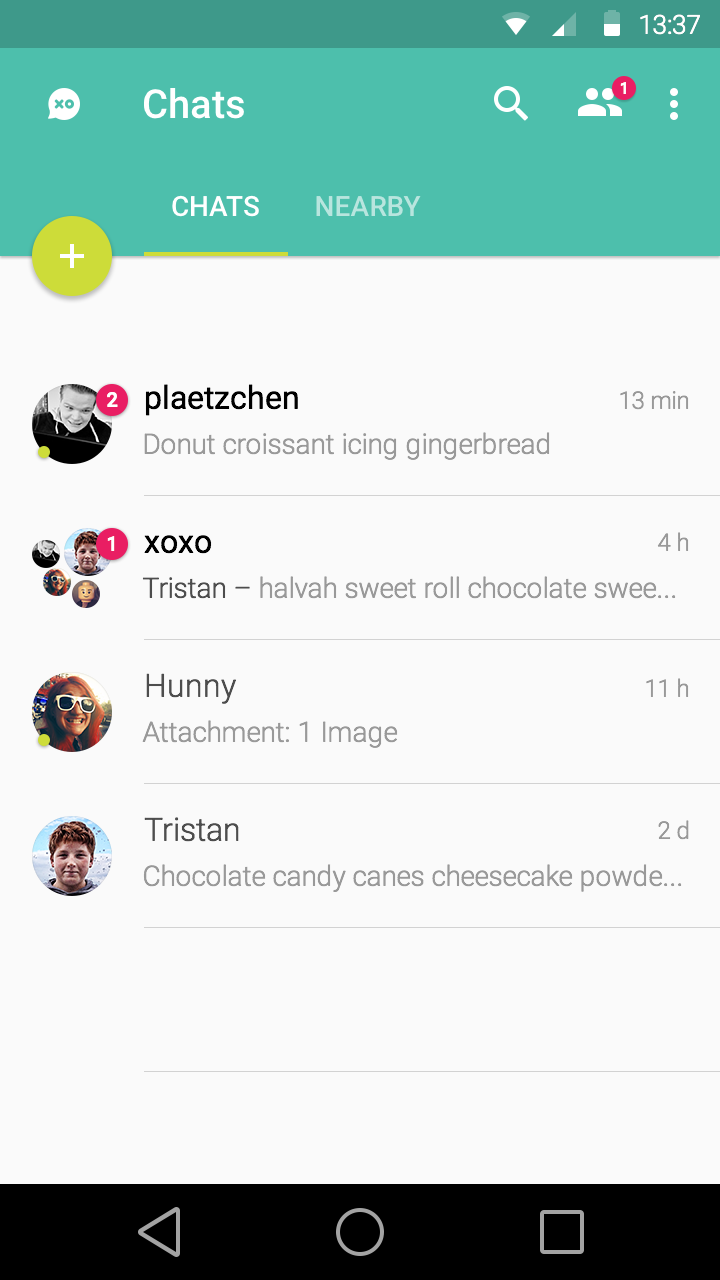
<style>
.page{position:relative;width:720px;height:1280px;background:#fafafa}
.page>*{position:absolute;margin:0}
.t1{font:26.1px "Roboto-Light";color:#ffffff}
.t2{font:40px "Roboto-Medium";color:#ffffff}
.t3{font:16px "Roboto-Medium";color:#ffffff}
.t4{font:28px "Roboto-Medium";color:#ffffff;text-transform:uppercase}
.t5{font:28px "Roboto-Medium";color:#b8e5de;text-transform:uppercase}
.t6{font:32px "Roboto-Regular";color:#000000}
.t7{font:20px "Roboto-Medium";color:#ffffff}
.t8{font:24px "Roboto-Light";color:#999999}
.t9{font:28px "Roboto-Light";color:#999999}
.t10{font:32px "Roboto-Regular";color:#010101}
.t11{font:28px "Roboto-Light";color:#4d4d4d}
.t12{font:32px "Roboto-Light";color:#4d4d4d}
</style>
<div class="page">
<p class="t1" style="left:640px;top:14px;width:60px;height:21px">13:37</p>
<p class="t2" style="left:144px;top:88px;width:100px;height:31px">Chats</p>
<p class="t3" style="left:620px;top:82px;width:6px;height:12px">1</p>
<p class="t4" style="left:172px;top:195px;width:87px;height:22px">Chats</p>
<p class="t5" style="left:316px;top:196px;width:105px;height:20px">Nearby</p>
<p class="t6" style="left:145px;top:384px;width:153px;height:32px">plaetzchen</p>
<p class="t7" style="left:107px;top:392px;width:11px;height:15px">2</p>
<p class="t8" style="left:620px;top:391px;width:69px;height:19px">13 min</p>
<p class="t9" style="left:144px;top:432px;width:406px;height:28px">Donut croissant icing gingerbread</p>
<p class="t8" style="left:657px;top:532px;width:32px;height:19px">4 h</p>
<p class="t7" style="left:107px;top:536px;width:8px;height:15px">1</p>
<p class="t10" style="left:144px;top:535px;width:68px;height:19px">xoxo</p>
<p class="t9" style="left:142px;top:576px;width:534px;height:23px"><span class="t11">Tristan –</span> halvah sweet roll chocolate swee...</p>
<p class="t12" style="left:146px;top:673px;width:90px;height:31px">Hunny</p>
<p class="t8" style="left:646px;top:678px;width:43px;height:19px">11 h</p>
<p class="t9" style="left:142px;top:720px;width:256px;height:28px">Attachment: 1 Image</p>
<p class="t12" style="left:144px;top:817px;width:95px;height:25px">Tristan</p>
<p class="t8" style="left:658px;top:820px;width:31px;height:20px">2 d</p>
<p class="t9" style="left:143px;top:864px;width:539px;height:28px">Chocolate candy canes cheesecake powde...</p>
</div>
